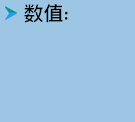
<style>
.page{position:relative;width:135px;height:122px;background:#9dc6e4}
.page>*{position:absolute;margin:0}
.t1{font:20px "LiHeiPro";color:#000000}
</style>
<div class="page">
<p class="t1" style="left:24px;top:4px;width:44px;height:19px">数值:</p>
</div>
